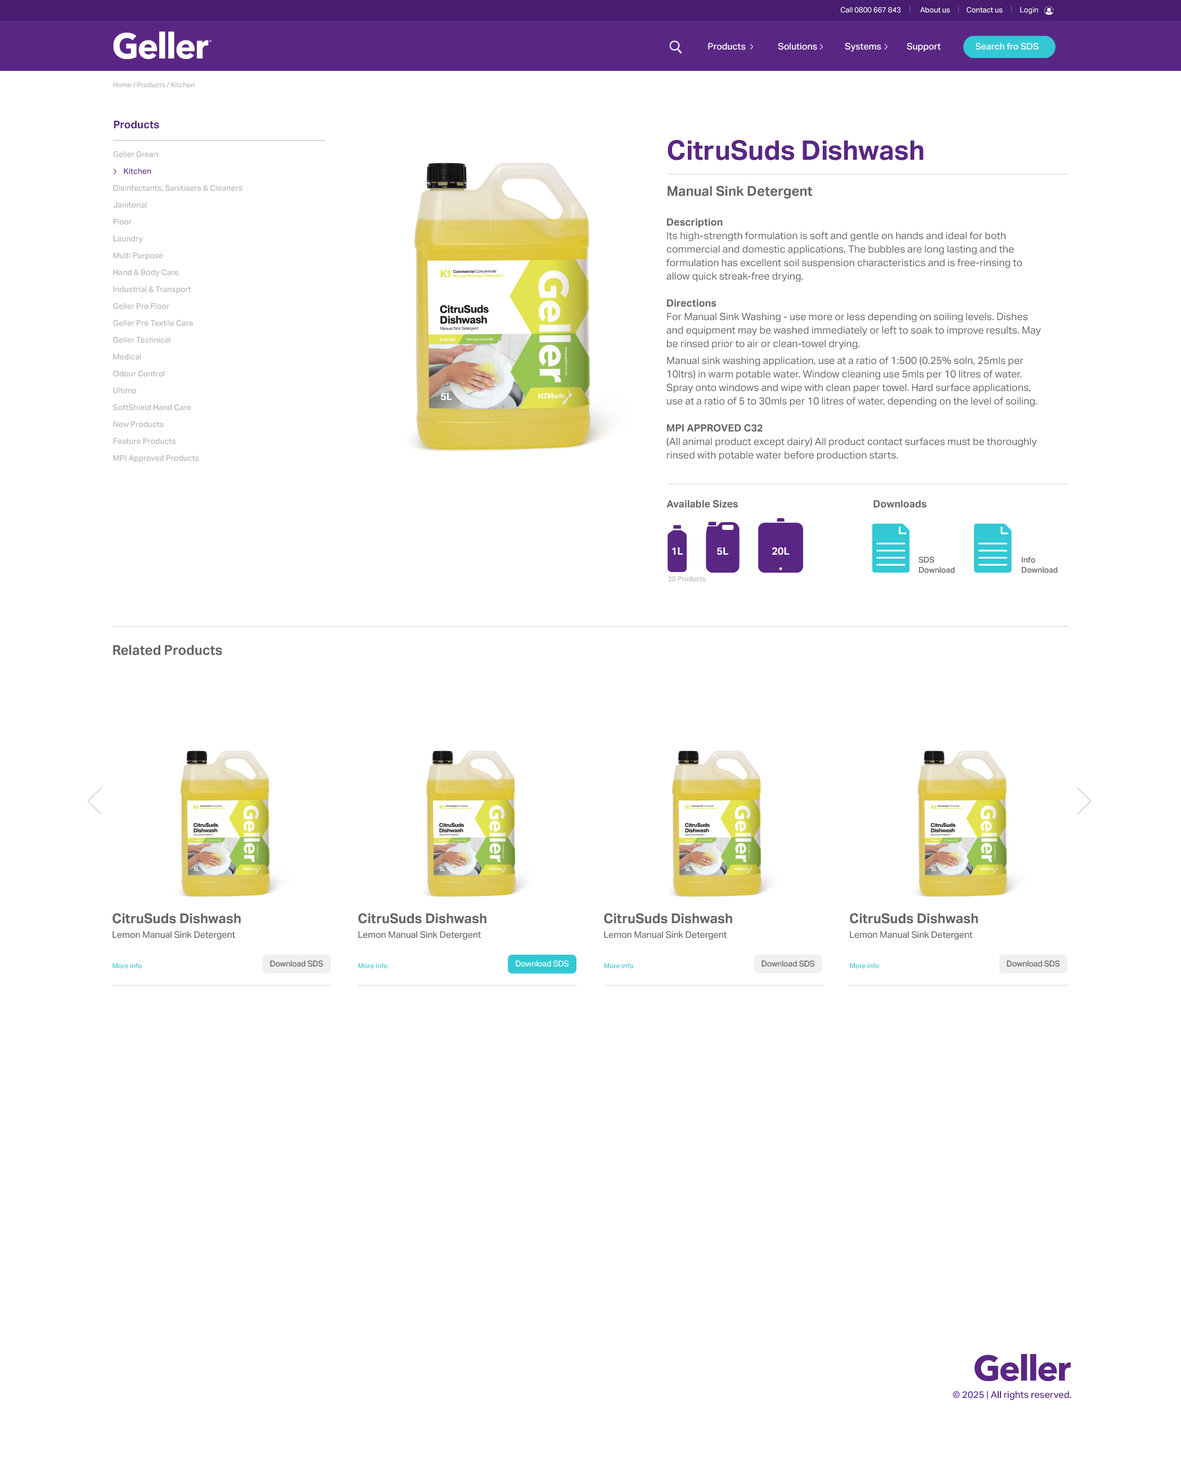
<style>
.page{position:relative;width:1181px;height:1484px;background:#ffffff}
.page>*{position:absolute;margin:0}
.t1{font:7.3px "AktivGrotesk-Regular";color:#fefefe}
.t2{font:9px "AktivGrotesk-Medium";color:#fefefe}
.t3{font:6.8px "AktivGrotesk-Medium";color:#b4b4b4}
.t4{font:10.7px "AktivGrotesk-Bold";color:#5a2684}
.t5{font:27px "AktivGrotesk-Bold";color:#5a2684}
.t6{font:7.9px/16.9px "AktivGrotesk-Medium";color:#b4b4b4}
.t7{font:7.9px/16.9px "AktivGrotesk-Medium";color:#5a2684}
.t8{font:13.5px "AktivGrotesk-Bold";color:#646464}
.t9{font:10.1px/13.5px "AktivGrotesk-Regular";color:#646464}
.t10{font:10.1px/13.5px "AktivGrotesk-Bold";color:#646464}
.t11{font:10.1px "AktivGrotesk-Bold";color:#646464}
.t12{font:6.8px "AktivGrotesk-Medium";color:#32c8d4}
.t13{font:9.4px "AktivGrotesk-Medium";color:#5a2684}
</style>
<div class="page">
<p class="t1" style="left:841px;top:7px;width:60px;height:6px">Call 0800 667 843</p>
<p class="t1" style="left:920px;top:7px;width:30px;height:6px">About us</p>
<p class="t1" style="left:967px;top:7px;width:36px;height:6px">Contact us</p>
<p class="t1" style="left:1020px;top:7px;width:18px;height:7px">Login</p>
<p class="t2" style="left:708px;top:43px;width:38px;height:7px">Products</p>
<p class="t2" style="left:778px;top:43px;width:39px;height:7px">Solutions</p>
<p class="t2" style="left:845px;top:43px;width:36px;height:9px">Systems</p>
<p class="t2" style="left:907px;top:43px;width:34px;height:9px">Support</p>
<p class="t2" style="left:975px;top:43px;width:64px;height:7px">Search fro SDS</p>
<p class="t3" style="left:113px;top:82px;width:82px;height:6px">Home / Products / Kitchen</p>
<p class="t4" style="left:114px;top:120px;width:45px;height:9px">Products</p>
<p class="t5" style="left:668px;top:140px;width:256px;height:20px">CitruSuds Dishwash</p>
<p class="t6" style="left:113px;top:151px;width:129px;height:311px">Geller Green<br><span class="t7">      Kitchen<br></span>Disinfectants, Sanitisers &amp; Cleaners<br>Janitorial<br>Floor<br>Laundry<br>Multi Purpose<br>Hand &amp; Body Care.<br>Industrial &amp; Transport<br>Geller Pro Floor<br>Geller Pro Textile Care<br>Geller Technical<br>Medical<br>Odour Control<br>Ultimo<br>SoftShield Hand Care<br>New Products<br>Feature Products<br>MPI Approved Products</p>
<p class="t8" style="left:668px;top:186px;width:145px;height:13px">Manual Sink Detergent</p>
<p class="t9" style="left:667px;top:218px;width:374px;height:243px"><span class="t10">Description<br></span>Its high-strength formulation is soft and gentle on hands and ideal for both commercial and domestic applications. The bubbles are long lasting and the formulation has excellent soil suspension characteristics and is free-rinsing to allow quick streak-free drying.<br><br><span class="t10">Directions<br></span>For Manual Sink Washing - use more or less depending on soiling levels. Dishes and equipment may be washed immediately or left to soak to improve results. May be rinsed prior to air or clean-towel drying.<br>Manual sink washing application, use at a ratio of 1:500 (0.25% soln, 25mls per 10ltrs) in warm potable water. Window cleaning use 5mls per 10 litres of water. Spray onto windows and wipe with clean paper towel. Hard surface applications, use at a ratio of 5 to 30mls per 10 litres of water, depending on the level of soiling.<br><br><span class="t10">MPI APPROVED C32<br></span>(All animal product except dairy) All product contact surfaces must be thoroughly rinsed with potable water before production starts.</p>
<p class="t11" style="left:667px;top:500px;width:71px;height:8px">Available Sizes</p>
<p class="t11" style="left:874px;top:500px;width:53px;height:8px">Downloads</p>
<p class="t3" style="left:668px;top:576px;width:38px;height:6px">20 Products</p>
<p class="t8" style="left:113px;top:645px;width:109px;height:10px">Related Products</p>
<p class="t12" style="left:112px;top:963px;width:30px;height:6px">More info</p>
<p class="t12" style="left:358px;top:963px;width:30px;height:6px">More info</p>
<p class="t12" style="left:604px;top:963px;width:29px;height:6px">More info</p>
<p class="t12" style="left:850px;top:963px;width:29px;height:6px">More info</p>
<p class="t13" style="left:953px;top:1390px;width:119px;height:10px">© 2025 | All rights reserved.</p>
</div>
